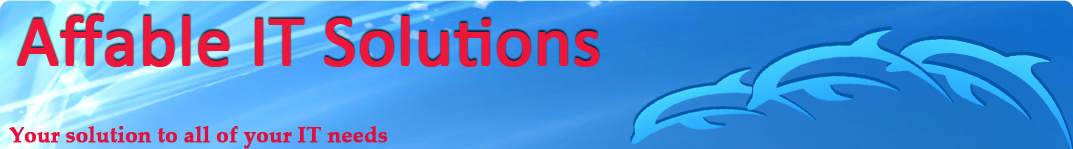
<style>
.page{position:relative;width:1073px;height:149px}
.page>*{position:absolute;margin:0}
.t1{font:72px "Calibri";letter-spacing:-0.01em;color:#ed163a;font-weight:bold}
.t2{font:22px "PalatinoLinotype-Bold";letter-spacing:-0.01em;color:#e40a38;font-weight:bold}
</style>
<div class="page">
<p class="t1" style="left:17px;top:15px;width:583px;height:52px">Affable IT Solutions</p>
<p class="t2" style="left:9px;top:126px;width:379px;height:23px;opacity:0.97">Your solution to all of your IT needs</p>
</div>
